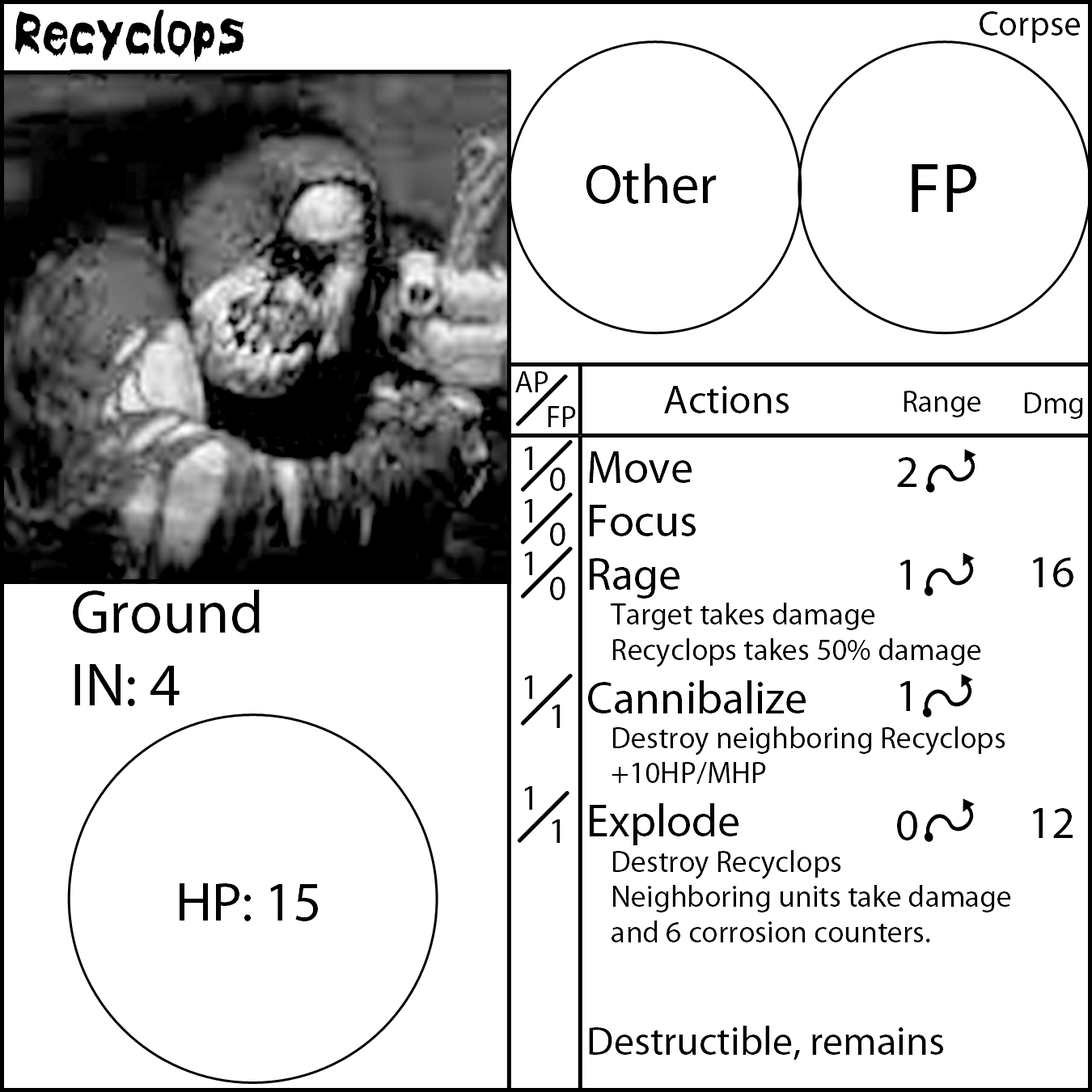
<style>
.page{position:relative;width:1092px;height:1092px;background:#ffffff}
.page>*{position:absolute;margin:0}
.t1{font:55.6px "Bloodyslime";color:#000000}
.t2{font:55.6px "MyriadPro-Regular";color:#000000}
.t3{font:70.8px "MyriadPro-Regular";color:#000000}
.t4{font:30.3px "MyriadPro-Regular";color:#000000}
.t5{font:40.4px "MyriadPro-Regular";color:#000000}
.t6{font:35.4px "MyriadPro-Regular";color:#000000}
.t7{font:45.5px "MyriadPro-Regular";color:#000000}
.t8{font:60.7px "MyriadPro-Regular";color:#000000}
</style>
<div class="page">
<p class="t1" style="left:15px;top:10px;width:228px;height:52px">Recyclops</p>
<p class="t2" style="left:586px;top:163px;width:131px;height:41px">Other</p>
<p class="t3" style="left:912px;top:164px;width:64px;height:48px">FP</p>
<p class="t4" style="left:515px;top:371px;width:33px;height:21px">AP</p>
<p class="t5" style="left:664px;top:386px;width:125px;height:27px">Actions</p>
<p class="t4" style="left:904px;top:391px;width:77px;height:26px">Range</p>
<p class="t4" style="left:1024px;top:392px;width:59px;height:27px">Dmg</p>
<p class="t4" style="left:548px;top:406px;width:28px;height:21px">FP</p>
<p class="t6" style="left:524px;top:447px;width:8px;height:363px">1<br>1<br>1<br> <br>1<br> <br>1</p>
<p class="t4" style="left:588px;top:451px;width:423px;height:609px"><span class="t7">Move<br>Focus<br>Rage<br></span> Target takes damage<br> Recyclops takes 50% damage<br><span class="t7">Cannibalize<br></span> Destroy neighboring Recyclops<br> +10HP/MHP<br><span class="t7">Explode<br></span> Destroy Recyclops<br> Neighboring units take damage<br> and 6 corrosion counters.<br><br><span class="t5">Destructible, remains</span></p>
<p class="t7" style="left:897px;top:457px;width:20px;height:383px;text-align:center">2<br><br>1<br> <br>1<br><br> <br>0</p>
<p class="t6" style="left:550px;top:468px;width:15px;height:375px">0<br>0<br>0<br> <br>1<br> <br>1</p>
<p class="t7" style="left:1032px;top:557px;width:41px;height:281px;text-align:center">16<br><br> <br><br>12</p>
<p class="t8" style="left:73px;top:590px;width:187px;height:116px">Ground<br>IN: 4</p>
<p class="t2" style="left:180px;top:883px;width:138px;height:38px">HP: 15</p>
</div>
